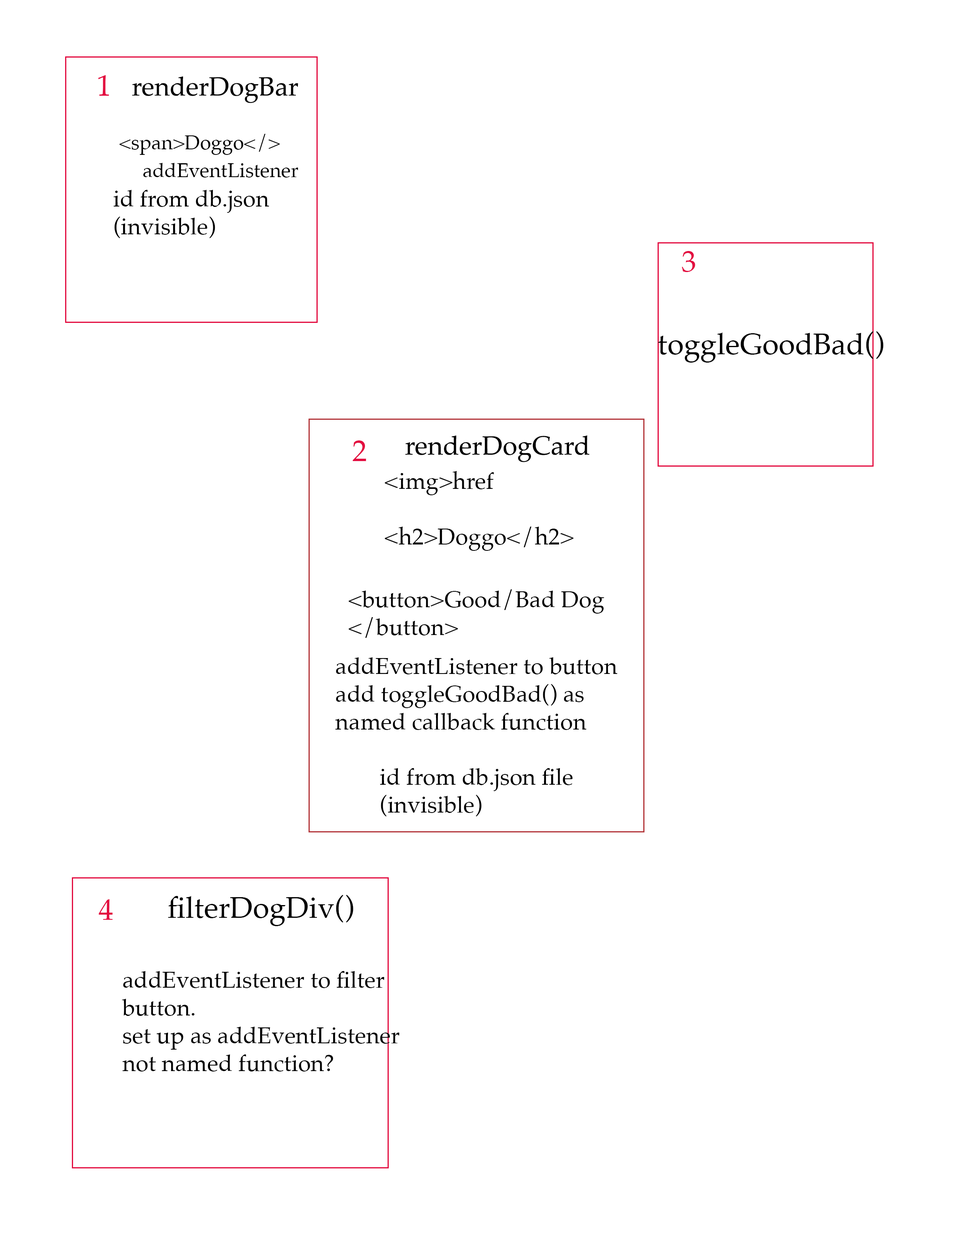
<style>
.page{position:relative;width:953px;height:1251px;background:#ffffff}
.page>*{position:absolute;margin:0}
.t1{font:29.8px "Palatino-Roman";color:#e30d40}
.t2{font:26.5px "Palatino-Roman";color:#000000}
.t3{font:19.9px "Palatino-Roman";color:#000000}
.t4{font:23.2px "Palatino-Roman";color:#000000}
.t5{font:29.8px "Palatino-Roman";color:#000000}
</style>
<div class="page">
<p class="t1" style="left:98px;top:75px;width:11px;height:21px">1</p>
<p class="t2" style="left:132px;top:76px;width:166px;height:27px">renderDogBar</p>
<p class="t3" style="left:120px;top:134px;width:160px;height:21px">&lt;span&gt;Doggo&lt;/&gt;</p>
<p class="t3" style="left:143px;top:163px;width:155px;height:15px">addEventListener</p>
<p class="t4" style="left:114px;top:190px;width:155px;height:48px">id from db.json<br>(invisible)</p>
<p class="t1" style="left:682px;top:251px;width:13px;height:21px">3</p>
<p class="t5" style="left:658px;top:331px;width:226px;height:32px">toggleGoodBad()</p>
<p class="t2" style="left:405px;top:435px;width:184px;height:27px">renderDogCard</p>
<p class="t1" style="left:353px;top:440px;width:13px;height:21px">2</p>
<p class="t4" style="left:385px;top:471px;width:189px;height:80px">&lt;img&gt;href<br><br>&lt;h2&gt;Doggo&lt;/h2&gt;</p>
<p class="t4" style="left:349px;top:589px;width:255px;height:49px">&lt;button&gt;Good/Bad Dog<br>&lt;/button&gt;</p>
<p class="t4" style="left:335px;top:657px;width:283px;height:73px">addEventListener to button<br>add toggleGoodBad() as <br>named callback function</p>
<p class="t4" style="left:380px;top:768px;width:193px;height:49px">id from db.json file<br>(invisible)</p>
<p class="t1" style="left:98px;top:899px;width:15px;height:21px">4</p>
<p class="t5" style="left:168px;top:895px;width:185px;height:31px">filterDogDiv()</p>
<p class="t4" style="left:122px;top:971px;width:278px;height:101px">addEventListener to filter<br>button.  <br>set up as addEventListener<br>not named function?</p>
</div>
